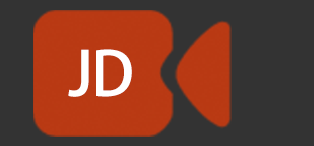
<style>
.page{position:relative;width:314px;height:146px;background:#333333}
.page>*{position:absolute;margin:0}
.t1{font:60px "AdobeHeitiStd-Regular";letter-spacing:-0.02em;color:#ffffff}
</style>
<div class="page">
<p class="t1" style="left:68px;top:49px;width:64px;height:48px">JD</p>
</div>
